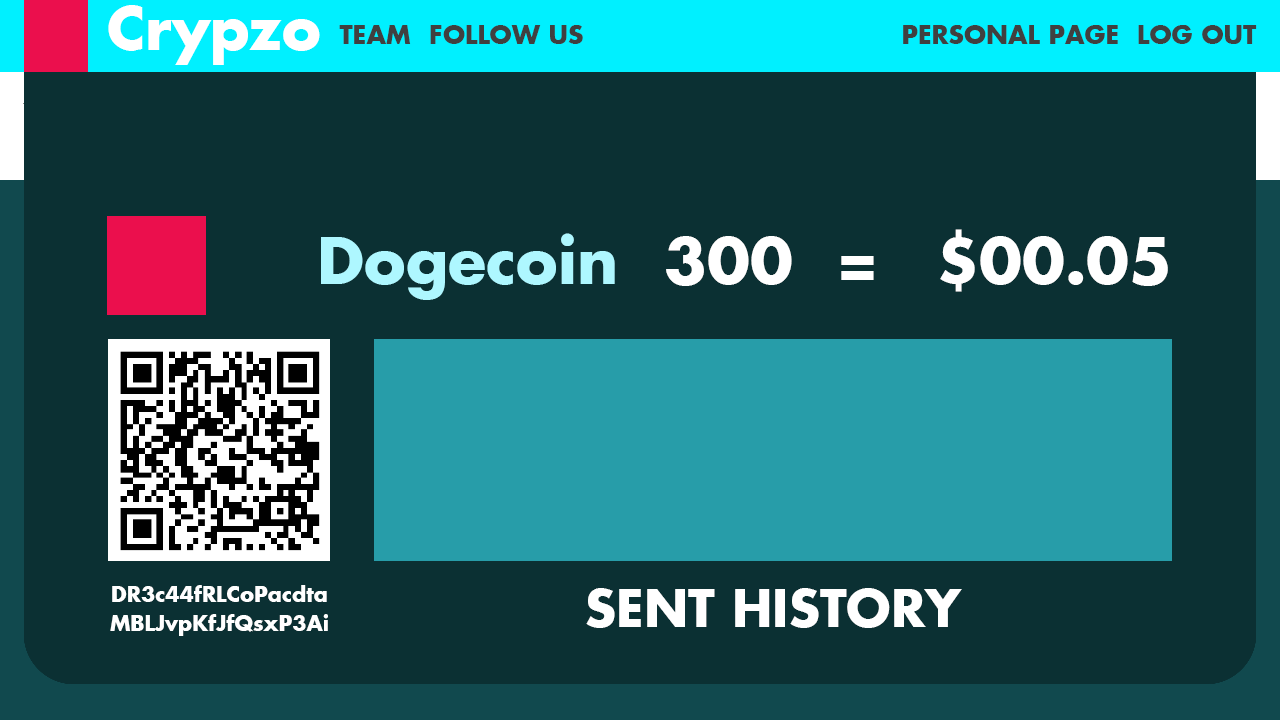
<style>
.page{position:relative;width:1280px;height:720px;background:#0b3033}
.page>*{position:absolute;margin:0}
.t1{font:58.3px "FuturaKoyu";color:#ffffff}
.t2{font:25px "FuturaKoyu";color:#404040}
.t3{font:25.4px "FuturaKoyu";color:#404040}
.t4{font:62.2px "FuturaKoyu";color:#aef7ff}
.t5{font:62.2px "FuturaKoyu";color:#ffffff}
.t6{font:20.8px/29.2px "FuturaKoyu";color:#ffffff}
.t7{font:50.2px "FuturaKoyu";color:#ffffff}
</style>
<div class="page">
<p class="t1" style="left:108px;top:5px;width:212px;height:60px">Crypzo</p>
<p class="t2" style="left:339px;top:25px;width:72px;height:19px">TEAM</p>
<p class="t3" style="left:430px;top:25px;width:153px;height:19px">FOLLOW US</p>
<p class="t3" style="left:903px;top:25px;width:215px;height:19px">PERSONAL PAGE</p>
<p class="t3" style="left:1138px;top:25px;width:119px;height:19px">LOG OUT</p>
<p class="t4" style="left:321px;top:233px;width:294px;height:67px">Dogecoin</p>
<p class="t5" style="left:940px;top:229px;width:228px;height:63px">$00.05</p>
<p class="t5" style="left:666px;top:236px;width:208px;height:50px">300  =</p>
<p class="t6" style="left:110px;top:585px;width:218px;height:51px;text-align:center">DR3c44fRLCoPacdtaMBLJvpKfJfQsxP3Ai</p>
<p class="t7" style="left:586px;top:588px;width:376px;height:40px">SENT HISTORY</p>
</div>
